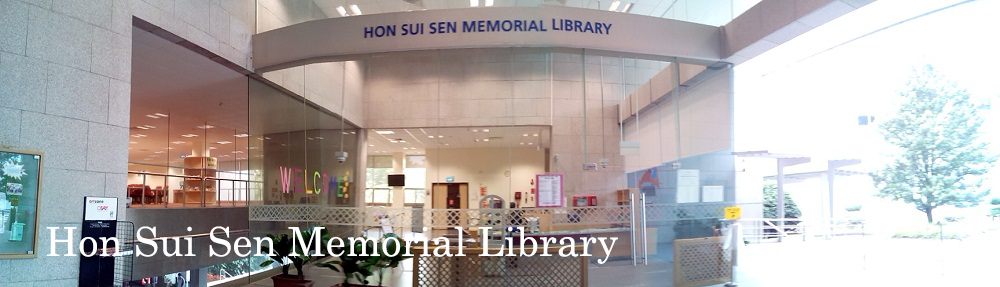
<style>
.page{position:relative;width:1000px;height:287px}
.page>*{position:absolute;margin:0}
.t1{font:40px "Century";color:#fffefe}
</style>
<div class="page">
<p class="t1" style="left:46px;top:226px;width:572px;height:38px">Hon Sui Sen Memorial Library</p>
</div>
